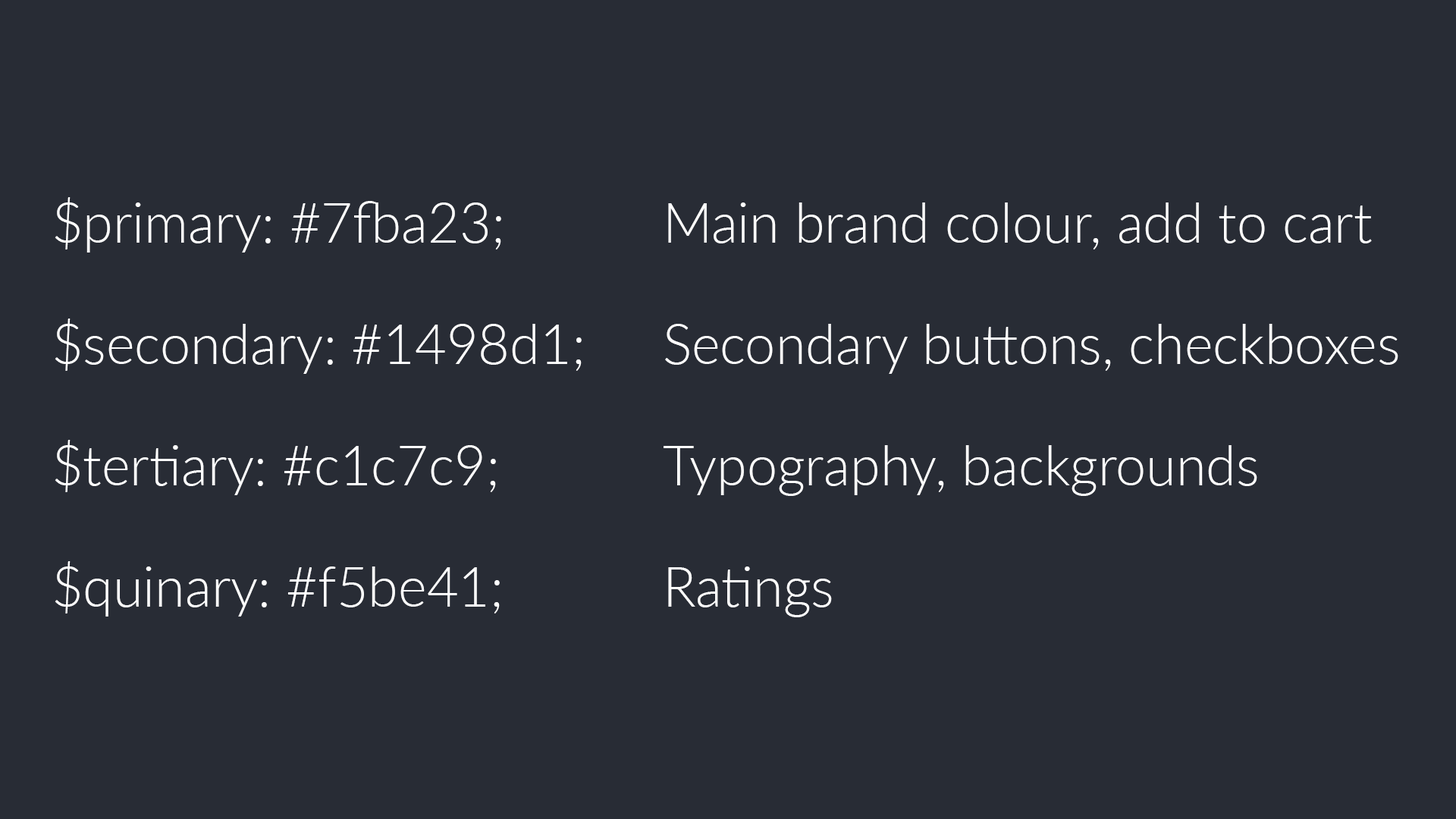
<style>
.page{position:relative;width:1456px;height:819px;background:#282c35}
.page>*{position:absolute;margin:0}
.t1{font:54.6px/121.3px "Lato-Light";color:#ffffff}
</style>
<div class="page">
<p class="t1" style="left:55px;top:197px;width:527px;height:420px">$primary: #7fba23;<br>$secondary: #1498d1;<br>$tertiary: #c1c7c9;<br>$quinary: #f5be41;</p>
<p class="t1" style="left:664px;top:202px;width:734px;height:415px">Main brand colour, add to cart<br>Secondary buttons, checkboxes<br>Typography, backgrounds<br>Ratings</p>
</div>
